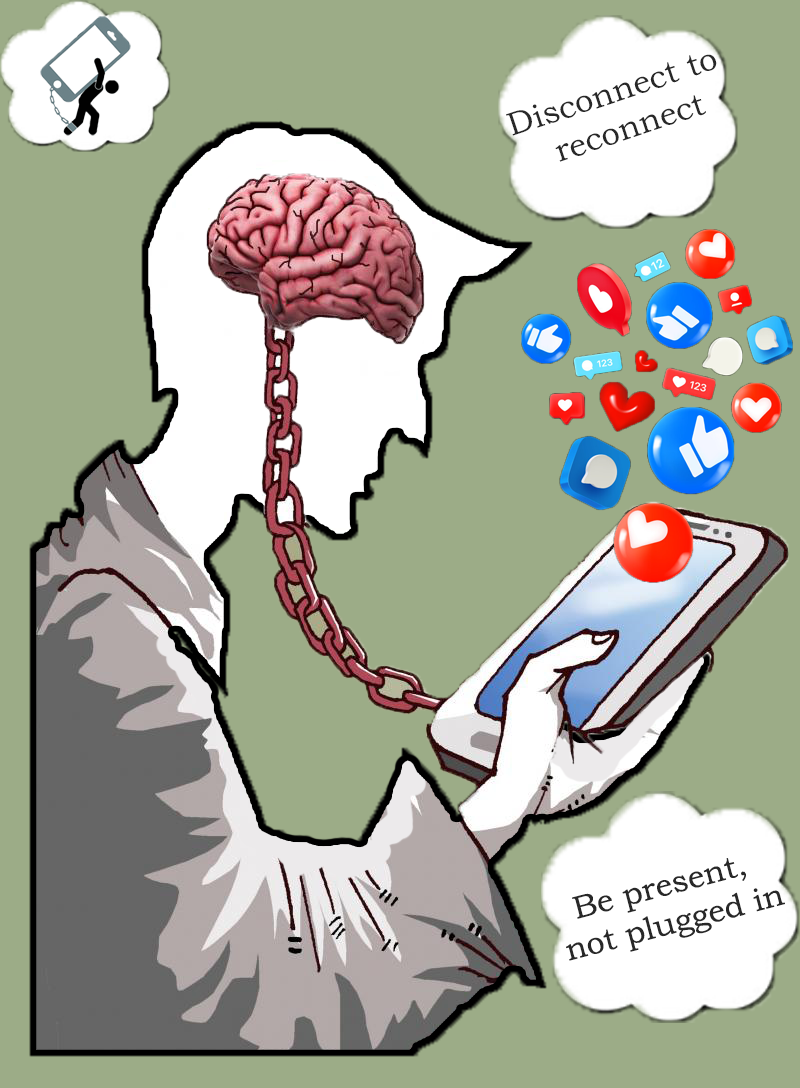
<style>
.page{position:relative;width:800px;height:1088px;background:#9cac87}
.page>*{position:absolute;margin:0}
.t1{font:32.7px "BookmanOldStyle";color:#282828}
.t2{font:32px "BookmanOldStyle";color:#282828}
</style>
<div class="page">
<p class="t1" style="left:506px;top:54px;width:211px;height:108px;text-align:center;rotate:-18deg">Disconnect to<br> reconnect</p>
<p class="t2" style="left:566px;top:858px;width:219px;height:103px;text-align:center;rotate:-15deg">Be present, <br>not plugged in</p>
</div>
